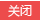
<style>
.page{position:relative;width:40px;height:20px;background:#ed4b4b}
.page>*{position:absolute;margin:0}
.t1{font:12px "MicrosoftYaHei";color:#ffffff}
</style>
<div class="page">
<p class="t1" style="left:8px;top:4px;width:24px;height:13px">关闭</p>
</div>
